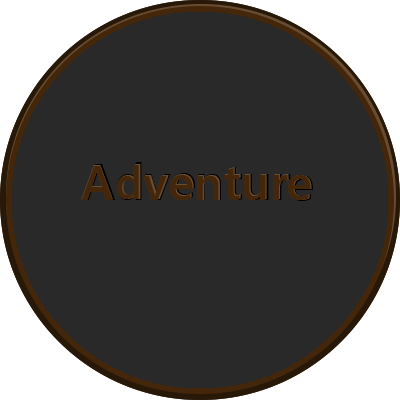
<style>
.page{position:relative;width:400px;height:400px;background:#292929}
.page>*{position:absolute;margin:0}
.t1{font:48.3px "YuGothicUI-Bold";letter-spacing:0.1em;color:#44260a}
.t2{font:50px "YuGothicUI-Bold";letter-spacing:0.1em;color:#44260a}
.t3{font:45.3px "YuGothicUI-Bold";letter-spacing:0.1em;color:#44260a}
.t4{font:50px "YuGothicUI-Bold";letter-spacing:0.1em}
.t5{font:46px "YuGothicUI-Bold";letter-spacing:0.1em;color:#44260a}
.t6{font:49.2px "YuGothicUI-Bold";letter-spacing:0.1em;color:#44260a}
.t7{font:48.5px "YuGothicUI-Bold";letter-spacing:0.1em;color:#44260a}
.t8{font:47.8px "YuGothicUI-Bold";letter-spacing:0.1em;color:#44260a}
.t9{font:47.5px "YuGothicUI-Bold";letter-spacing:0.1em;color:#44260a}
.t10{font:47.2px "YuGothicUI-Bold";letter-spacing:0.1em;color:#44260a}
.t11{font:47.2px "YuGothicUI-Bold";letter-spacing:0.1em}
.t12{font:46.9px "YuGothicUI-Bold";letter-spacing:0.1em;color:#44260a}
.t13{font:47.7px "YuGothicUI-Bold";letter-spacing:0.1em;color:#44260a}
</style>
<div class="page">
<p class="t1" style="left:81px;top:165px;width:32px;height:34px">A</p>
<p class="t1" style="left:81px;top:166px;width:32px;height:34px">A</p>
<p class="t2" style="left:82px;top:164px;width:33px;height:36px">A</p>
<p class="t3" style="left:116px;top:165px;width:23px;height:34px">d</p>
<p class="t4" style="left:117px;top:162px;width:25px;height:38px">d</p>
<p class="t5" style="left:117px;top:164px;width:24px;height:35px">d</p>
<p class="t4" style="left:145px;top:174px;width:26px;height:26px">v</p>
<p class="t6" style="left:171px;top:174px;width:23px;height:25px">e</p>
<p class="t4" style="left:172px;top:173px;width:23px;height:26px">e</p>
<p class="t4" style="left:198px;top:174px;width:23px;height:26px">n</p>
<p class="t7" style="left:224px;top:168px;width:16px;height:32px">t</p>
<p class="t7" style="left:225px;top:167px;width:16px;height:32px">t</p>
<p class="t2" style="left:226px;top:167px;width:16px;height:33px">t</p>
<p class="t8" style="left:245px;top:174px;width:22px;height:25px">u</p>
<p class="t4" style="left:246px;top:174px;width:23px;height:26px">u</p>
<p class="t9" style="left:274px;top:174px;width:15px;height:25px">r</p>
<p class="t4" style="left:275px;top:174px;width:16px;height:26px">r</p>
<p class="t10" style="left:143px;top:176px;width:24px;height:24px">v</p>
<p class="t11" style="left:145px;top:175px;width:24px;height:24px">v</p>
<p class="t6" style="left:170px;top:175px;width:23px;height:25px">e</p>
<p class="t12" style="left:197px;top:176px;width:22px;height:24px">n</p>
<p class="t13" style="left:198px;top:175px;width:22px;height:25px">n</p>
<p class="t8" style="left:244px;top:175px;width:22px;height:25px">u</p>
<p class="t9" style="left:273px;top:175px;width:15px;height:25px">r</p>
<p class="t6" style="left:288px;top:175px;width:23px;height:25px">e</p>
<p class="t6" style="left:289px;top:175px;width:23px;height:25px">e</p>
<p class="t2" style="left:290px;top:175px;width:23px;height:26px">e</p>
</div>
